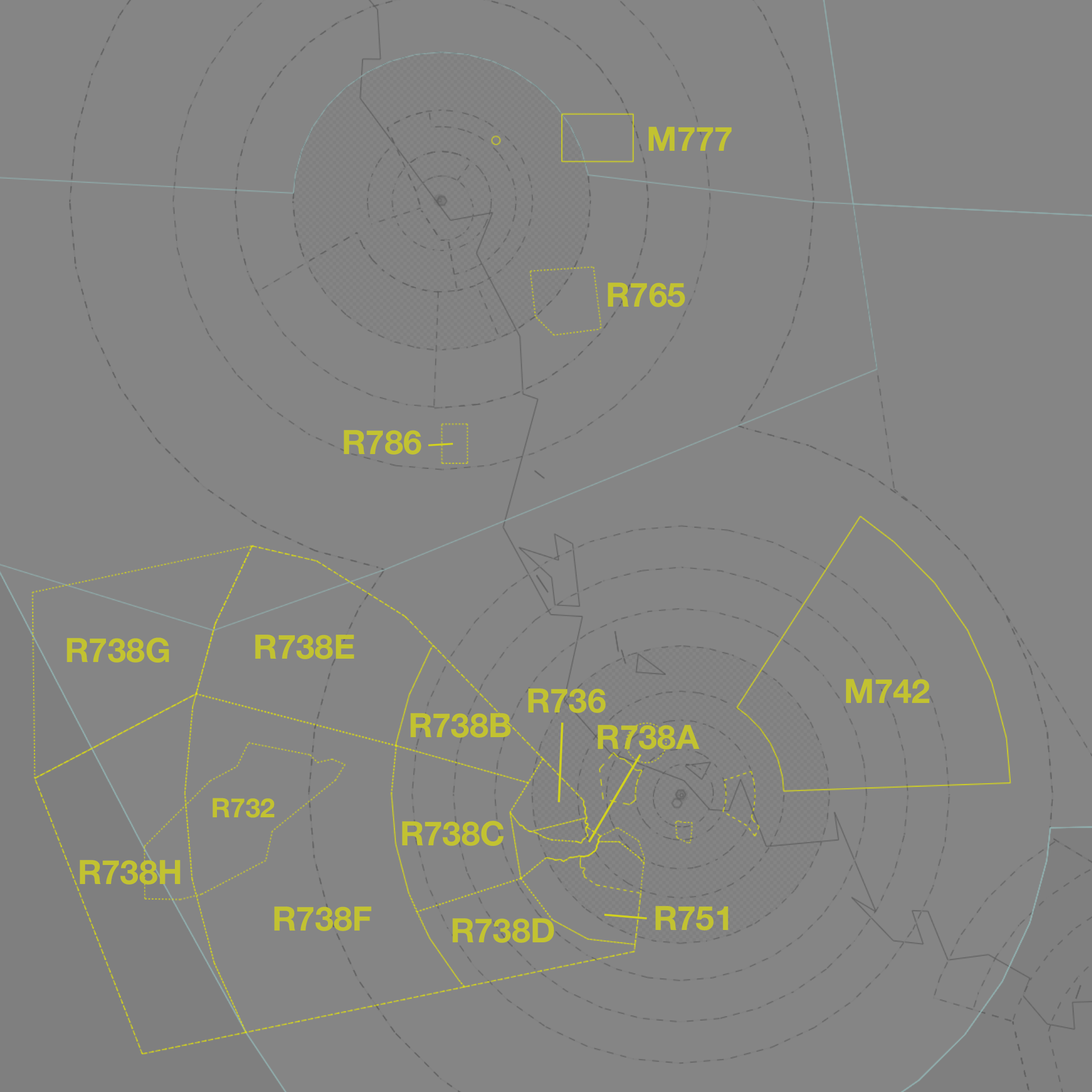
<style>
.page{position:relative;width:1092px;height:1092px;background:#858585}
.page>*{position:absolute;margin:0}
.t1{font:33.6px "HelveticaNeue-Bold";color:#c2c231}
.t2{font:26.9px "HelveticaNeue-Bold";color:#c2c231}
</style>
<div class="page">
<p class="t1" style="left:649px;top:127px;width:83px;height:24px">M777</p>
<p class="t1" style="left:608px;top:283px;width:77px;height:24px">R765</p>
<p class="t1" style="left:344px;top:430px;width:78px;height:25px">R786</p>
<p class="t1" style="left:67px;top:637px;width:102px;height:26px">R738G</p>
<p class="t1" style="left:255px;top:635px;width:99px;height:24px">R738E</p>
<p class="t1" style="left:528px;top:688px;width:78px;height:25px">R736</p>
<p class="t1" style="left:846px;top:679px;width:83px;height:24px">M742</p>
<p class="t1" style="left:410px;top:713px;width:101px;height:25px">R738B</p>
<p class="t1" style="left:598px;top:725px;width:102px;height:24px">R738A</p>
<p class="t2" style="left:212px;top:798px;width:63px;height:20px">R732</p>
<p class="t1" style="left:402px;top:821px;width:102px;height:25px">R738C</p>
<p class="t1" style="left:80px;top:860px;width:101px;height:25px">R738H</p>
<p class="t1" style="left:655px;top:906px;width:73px;height:25px">R751</p>
<p class="t1" style="left:274px;top:906px;width:98px;height:25px">R738F</p>
<p class="t1" style="left:452px;top:918px;width:102px;height:25px">R738D</p>
</div>
